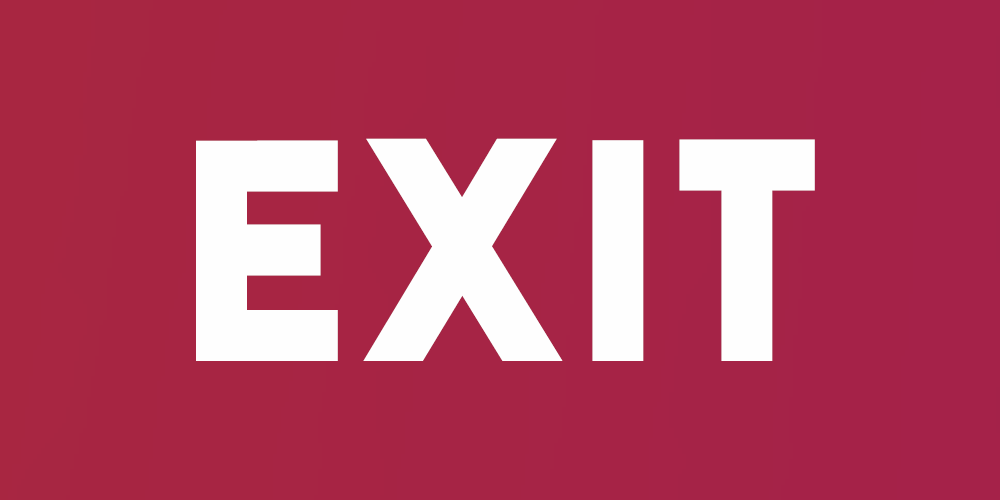
<style>
.page{position:relative;width:1000px;height:500px}
.page>*{position:absolute;margin:0}
.t1{font:300px "TheBoldFont";letter-spacing:0.05em;color:#fefefe}
</style>
<div class="page">
<p class="t1" style="left:196px;top:138px;width:619px;height:223px">EXIT</p>
</div>
